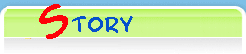
<style>
.page{position:relative;width:246px;height:54px}
.page>*{position:absolute;margin:0}
.t1{font:48px "ComicGeek";color:#fe0208}
.t2{font:18px "BlambotPro";color:#0650cc}
</style>
<div class="page">
<p class="t1" style="left:39px;top:4px;width:29px;height:35px">S</p>
<p class="t2" style="left:72px;top:16px;width:61px;height:17px">tory</p>
</div>
